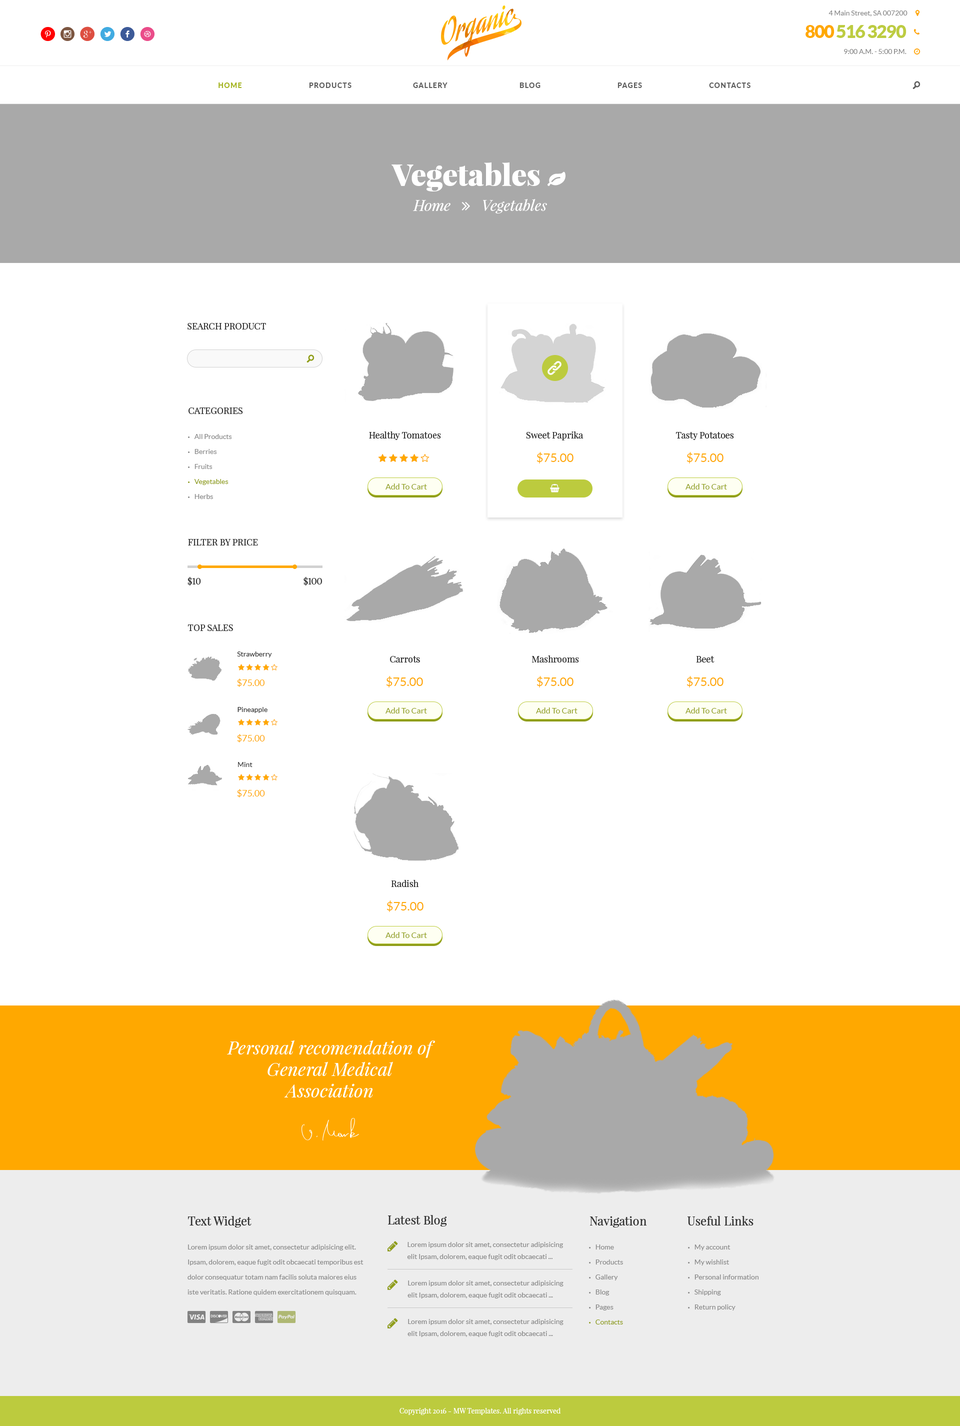
<style>
.page{position:relative;width:960px;height:1426px;background:#ffffff}
.page>*{position:absolute;margin:0}
.t1{font:7px "Lato-Regular";color:#898989}
.t2{font:20px "SocialicoPlus";letter-spacing:0.2em;color:#ff0000}
.t3{font:20px "SocialicoPlus";letter-spacing:0.2em;color:#7c5641}
.t4{font:20px "SocialicoPlus";letter-spacing:0.2em;color:#dd4e41}
.t5{font:20px "Socialico";letter-spacing:0.2em;color:#41abe1}
.t6{font:20px "Socialico";letter-spacing:0.2em;color:#3d5a98}
.t7{font:20px "Socialico";letter-spacing:0.2em;color:#ea4c89}
.t8{font:18px "Lato-Black";letter-spacing:-0.05em;color:#bdcc41}
.t9{font:18px "Lato-Black";letter-spacing:-0.05em;color:#ffa800}
.t10{font:7px "Lato-Heavy";letter-spacing:0.1em;color:#a6b525;text-transform:uppercase}
.t11{font:7px "Lato-Heavy";letter-spacing:0.1em;color:#606060;text-transform:uppercase}
.t12{font:15px "SocialicoPlus";color:#606060;text-transform:uppercase}
.t13{font:9px "PlayfairDisplay-Regular";color:#333333;text-transform:uppercase}
.t14{font:15px "SocialicoPlus";color:#909e1a;text-transform:uppercase}
.t15{font:7px/15px "Lato-Regular";color:#898989}
.t16{font:7px/15px "MyriadPro-Regular";color:#898989;text-transform:uppercase}
.t17{font:7px/15px "MyriadPro-Regular";color:#909e1a;text-transform:uppercase}
.t18{font:7px/15px "Lato-Regular";color:#909e1a}
.t19{font:9px "PlayfairDisplay-Regular";color:#333333}
.t20{font:12px "Lato-Regular";color:#ffa800}
.t21{font:8px "Lato-Regular";color:#909e1a}
.t22{font:7px "Lato-Regular";color:#333333}
.t23{font:9px "Lato-Regular";color:#ffa800}
.t24{font:18px "PlayfairDisplay-Italic";color:#ffffff}
.t25{font:12px "PlayfairDisplay-Regular";color:#333333}
.t26{font:7px/12px "Lato-Regular";color:#898989}
.t27{font:7px "PlayfairDisplay-Regular";color:#ffffff}
</style>
<div class="page">
<p class="t1" style="left:829px;top:11px;width:79px;height:6px">4 Main Street, SA 007200</p>
<p class="t2" style="left:41px;top:27px;width:114px;height:14px">p<span class="t3">i</span><span class="t4">h</span><span class="t5">l</span><span class="t6">f</span><span class="t7">d</span></p>
<p class="t8" style="left:806px;top:25px;width:101px;height:13px"><span class="t9">800</span> 516 3290</p>
<p class="t1" style="left:844px;top:49px;width:63px;height:5px">9:00 A.M. - 5:00 P.M.</p>
<p class="t10" style="left:219px;top:83px;width:23px;height:5px">Home</p>
<p class="t11" style="left:309px;top:83px;width:43px;height:5px">Products</p>
<p class="t11" style="left:413px;top:83px;width:35px;height:5px">Gallery</p>
<p class="t11" style="left:520px;top:83px;width:21px;height:5px">Blog</p>
<p class="t11" style="left:618px;top:83px;width:24px;height:5px">Pages</p>
<p class="t11" style="left:709px;top:83px;width:42px;height:5px">Contacts</p>
<p class="t12" style="left:913px;top:81px;width:8px;height:8px">o</p>
<p class="t13" style="left:188px;top:323px;width:78px;height:7px">Search product</p>
<p class="t14" style="left:307px;top:355px;width:8px;height:8px">o</p>
<p class="t13" style="left:189px;top:408px;width:54px;height:6px">Categories</p>
<p class="t15" style="left:188px;top:434px;width:44px;height:65px"><span class="t16">•   </span>All Products<br><span class="t16">•   </span>Berries<br><span class="t16">•   </span>Fruits<br><span class="t17">•   </span><span class="t18">Vegetables<br></span><span class="t16">•   </span>Herbs</p>
<p class="t19" style="left:369px;top:431px;width:72px;height:9px">Healthy Tomatoes</p>
<p class="t19" style="left:526px;top:431px;width:58px;height:10px">Sweet Paprika</p>
<p class="t19" style="left:676px;top:432px;width:58px;height:8px">Tasty Potatoes</p>
<p class="t20" style="left:537px;top:452px;width:37px;height:12px">$75.00</p>
<p class="t20" style="left:687px;top:452px;width:37px;height:12px">$75.00</p>
<p class="t21" style="left:386px;top:484px;width:41px;height:6px">Add To Cart</p>
<p class="t21" style="left:686px;top:484px;width:41px;height:6px">Add To Cart</p>
<p class="t13" style="left:188px;top:539px;width:70px;height:7px">FILTER BY PRICE</p>
<p class="t13" style="left:188px;top:577px;width:13px;height:9px">$10</p>
<p class="t13" style="left:304px;top:577px;width:18px;height:9px">$100</p>
<p class="t13" style="left:188px;top:625px;width:45px;height:6px">Top sales</p>
<p class="t22" style="left:237px;top:652px;width:35px;height:6px">Strawberry</p>
<p class="t19" style="left:390px;top:656px;width:30px;height:7px">Carrots</p>
<p class="t19" style="left:532px;top:655px;width:47px;height:8px">Mashrooms</p>
<p class="t19" style="left:696px;top:656px;width:19px;height:7px">Beet</p>
<p class="t20" style="left:386px;top:676px;width:37px;height:12px">$75.00</p>
<p class="t20" style="left:537px;top:676px;width:37px;height:12px">$75.00</p>
<p class="t20" style="left:687px;top:676px;width:37px;height:12px">$75.00</p>
<p class="t23" style="left:237px;top:679px;width:28px;height:8px">$75.00</p>
<p class="t22" style="left:238px;top:707px;width:30px;height:6px">Pineapple</p>
<p class="t21" style="left:386px;top:708px;width:41px;height:6px">Add To Cart</p>
<p class="t21" style="left:536px;top:708px;width:42px;height:6px">Add To Cart</p>
<p class="t21" style="left:686px;top:708px;width:41px;height:6px">Add To Cart</p>
<p class="t23" style="left:237px;top:734px;width:28px;height:9px">$75.00</p>
<p class="t22" style="left:238px;top:762px;width:15px;height:5px">Mint</p>
<p class="t23" style="left:237px;top:789px;width:28px;height:9px">$75.00</p>
<p class="t19" style="left:391px;top:880px;width:28px;height:7px">Radish</p>
<p class="t20" style="left:387px;top:901px;width:37px;height:11px">$75.00</p>
<p class="t21" style="left:386px;top:932px;width:41px;height:6px">Add To Cart</p>
<p class="t24" style="left:227px;top:1040px;width:208px;height:58px;text-align:center">Personal recomendation of General Medical Association</p>
<p class="t25" style="left:188px;top:1216px;width:64px;height:12px">Text Widget</p>
<p class="t25" style="left:388px;top:1215px;width:59px;height:12px">Latest Blog</p>
<p class="t25" style="left:590px;top:1216px;width:57px;height:12px">Navigation</p>
<p class="t25" style="left:688px;top:1216px;width:66px;height:10px">Useful Links</p>
<p class="t15" style="left:188px;top:1245px;width:176px;height:51px">Lorem ipsum dolor sit amet, consectetur adipisicing elit. Ipsam, dolorem, eaque fugit odit obcaecati temporibus est dolor consequatur totam nam facilis soluta maiores eius iste veritatis. Ratione quidem exercitationem quisquam.</p>
<p class="t26" style="left:407px;top:1242px;width:157px;height:18px">Lorem ipsum dolor sit amet, consectetur adipisicing elit Ipsam, dolorem, eaque fugit odit obcaecati ...</p>
<p class="t15" style="left:589px;top:1245px;width:34px;height:80px"><span class="t16">•   </span>Home<br><span class="t16">•   </span>Products<br><span class="t16">•   </span>Gallery<br><span class="t16">•   </span>Blog<br><span class="t16">•   </span>Pages<br><span class="t17">•   </span><span class="t18">Contacts</span></p>
<p class="t15" style="left:688px;top:1245px;width:71px;height:66px"><span class="t16">•   </span>My account<br><span class="t16">•   </span>My wishlist<br><span class="t16">•   </span>Personal information<br><span class="t16">•   </span>Shipping<br><span class="t16">•   </span>Return policy</p>
<p class="t26" style="left:408px;top:1281px;width:156px;height:18px">Lorem ipsum dolor sit amet, consectetur adipisicing elit Ipsam, dolorem, eaque fugit odit obcaecati ...</p>
<p class="t26" style="left:408px;top:1319px;width:156px;height:18px">Lorem ipsum dolor sit amet, consectetur adipisicing elit Ipsam, dolorem, eaque fugit odit obcaecati ...</p>
<p class="t27" style="left:400px;top:1408px;width:161px;height:7px">Copyright 2016 - MW Templates. All rights reserved</p>
</div>
